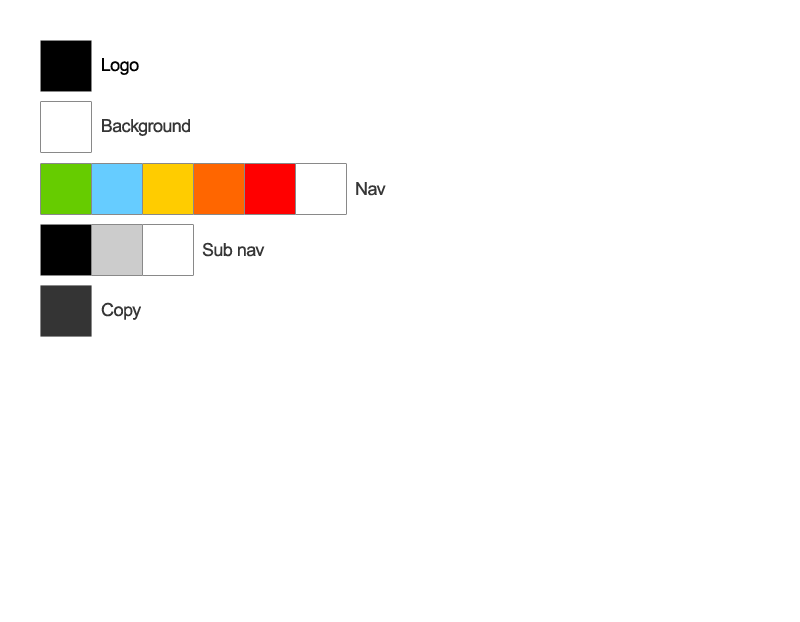
<style>
.page{position:relative;width:800px;height:622px;background:#ffffff}
.page>*{position:absolute;margin:0}
.t1{font:18px "ArialMT";letter-spacing:-0.025em;color:#000000}
.t2{font:18px "ArialMT";letter-spacing:-0.025em;color:#363636}
</style>
<div class="page">
<p class="t1" style="left:102px;top:58px;width:37px;height:17px">Logo</p>
<p class="t2" style="left:102px;top:119px;width:88px;height:17px">Background</p>
<p class="t2" style="left:356px;top:182px;width:30px;height:14px">Nav</p>
<p class="t2" style="left:202px;top:242px;width:63px;height:15px">Sub nav</p>
<p class="t2" style="left:101px;top:302px;width:40px;height:18px">Copy</p>
</div>
